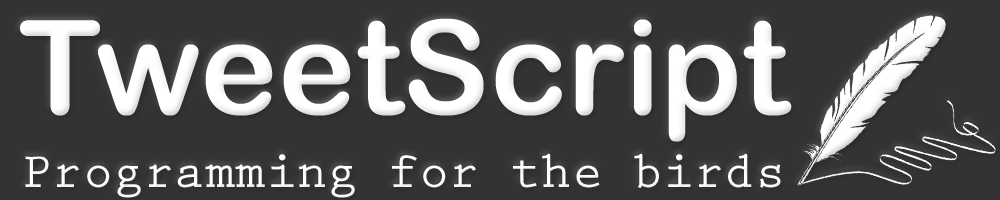
<style>
.page{position:relative;width:1000px;height:200px;background:#333333}
.page>*{position:absolute;margin:0}
.t1{font:50.9px/72.7px "PrestigeEliteStd-Bd";color:#ffffff}
.t2{font:130.9px "ArialRoundedMTBold";color:#ffffff}
</style>
<div class="page">
<p class="t1" style="left:20px;top:18px;width:772px;height:180px;text-align:center"><span class="t2">TweetScript<br></span>Programming for the birds</p>
</div>
